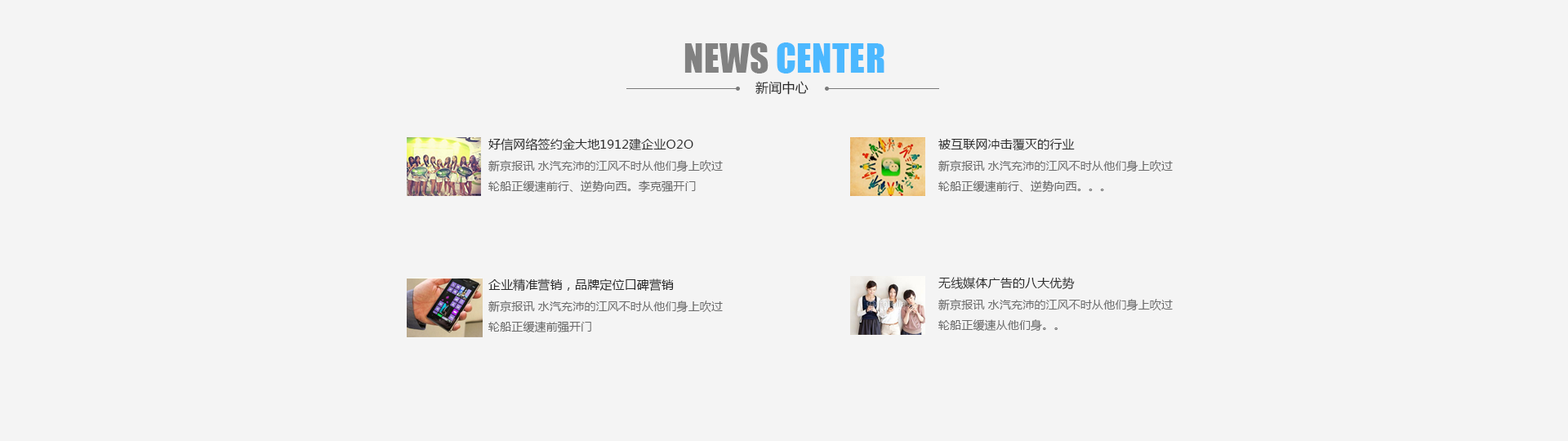
<style>
.page{position:relative;width:1568px;height:441px;background:#f4f4f4}
.page>*{position:absolute;margin:0}
.t1{font:36.6px "Impact";letter-spacing:0.01em;color:#43b6ff;text-transform:uppercase}
.t2{font:36.6px "Impact";letter-spacing:0.01em;color:#7c7c7c;text-transform:uppercase}
.t3{font:13.1px "MicrosoftYaHei";letter-spacing:0.01em;color:#292929}
.t4{font:12.2px "MicrosoftYaHei";letter-spacing:0.01em;color:#292929}
.t5{font:11.4px "MicrosoftYaHei";letter-spacing:0.01em;color:#6a6a6a}
</style>
<div class="page">
<p class="t1" style="left:684px;top:42px;width:200px;height:32px;opacity:0.97"><span class="t2">NEWS </span>CENTER</p>
<p class="t3" style="left:755px;top:81px;width:53px;height:14px">新闻中心</p>
<p class="t4" style="left:488px;top:138px;width:205px;height:13px">好信网络签约金大地1912建企业O2O</p>
<p class="t4" style="left:938px;top:139px;width:137px;height:11px">被互联网冲击覆灭的行业</p>
<p class="t5" style="left:488px;top:160px;width:235px;height:33px">新京报讯 水汽充沛的江风不时从他们身上吹过<br>轮船正缓速前行、逆势向西。李克强开门</p>
<p class="t5" style="left:938px;top:160px;width:235px;height:33px">新京报讯 水汽充沛的江风不时从他们身上吹过<br>轮船正缓速前行、逆势向西。。。</p>
<p class="t4" style="left:488px;top:278px;width:186px;height:14px">企业精准营销，品牌定位口碑营销</p>
<p class="t4" style="left:938px;top:277px;width:137px;height:12px">无线媒体广告的八大优势</p>
<p class="t5" style="left:488px;top:301px;width:235px;height:32px">新京报讯 水汽充沛的江风不时从他们身上吹过<br>轮船正缓速前强开门</p>
<p class="t5" style="left:938px;top:299px;width:235px;height:33px">新京报讯 水汽充沛的江风不时从他们身上吹过<br>轮船正缓速从他们身。。</p>
</div>
